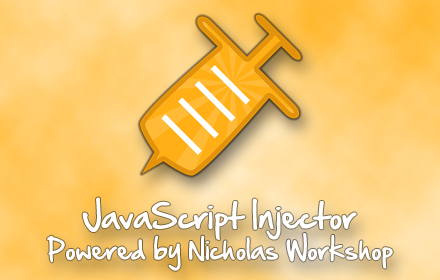
<style>
.page{position:relative;width:440px;height:280px}
.page>*{position:absolute;margin:0}
.t1{font:30px "HandOfSean";color:#ffffff}
.t2{font:24px "HandOfSean";color:#ffffff}
</style>
<div class="page">
<p class="t1" style="left:82px;top:197px;width:275px;height:43px">JavaScript Injector</p>
<p class="t2" style="left:47px;top:232px;width:346px;height:39px">Powered by Nicholas Workshop</p>
</div>
